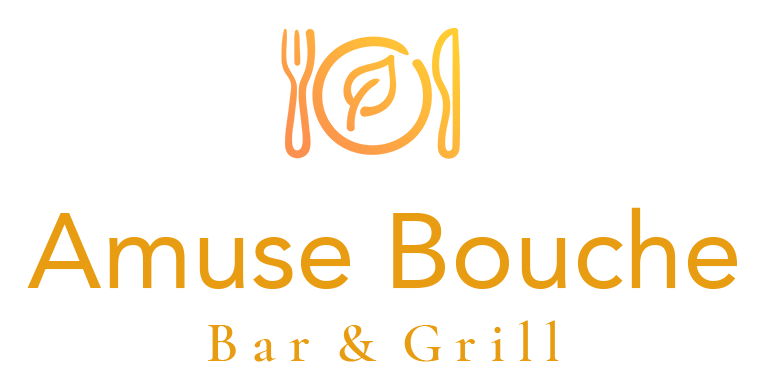
<style>
.page{position:relative;width:772px;height:387px;background:#ffffff}
.page>*{position:absolute;margin:0}
.t1{font:106px "Avenir-Roman";color:#e89c11}
.t2{font:56px "CormorantGaramond-SemiBold";color:#e89c11}
</style>
<div class="page">
<p class="t1" style="left:27px;top:207px;width:710px;height:82px">Amuse Bouche</p>
<p class="t2" style="left:208px;top:320px;width:351px;height:42px">B a r  &amp;  G r i l l</p>
</div>
